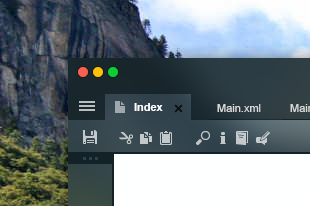
<style>
.page{position:relative;width:310px;height:206px}
.page>*{position:absolute;margin:0}
.t1{font:11px "Arial-BoldMT";color:#ffffff}
.t2{font:11px "ArialMT";color:#d7d7d7}
</style>
<div class="page">
<p class="t1" style="left:134px;top:103px;width:29px;height:8px">Index</p>
<p class="t2" style="left:217px;top:104px;width:44px;height:8px">Main.xml</p>
</div>
